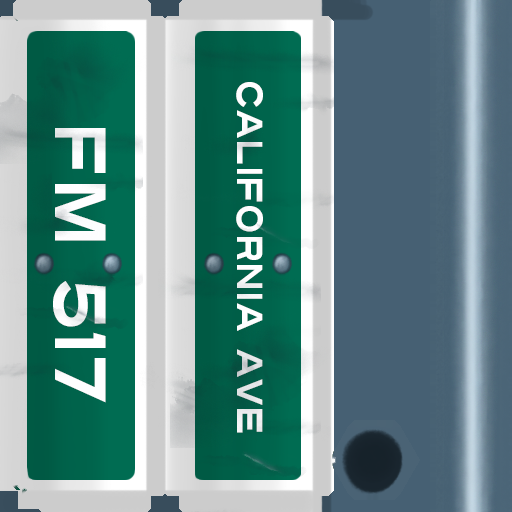
<style>
.page{position:relative;width:512px;height:512px}
.page>*{position:absolute;margin:0}
.t1{font:36px "Turnpike";color:#fefeff;scale:0.75 1}
.t2{font:72px "Turnpike";color:#fefeff;scale:0.75 1}
</style>
<div class="page">
<p class="t1" style="left:236px;top:82px;width:27px;height:351px;rotate:90deg">California Ave</p>
<p class="t2" style="left:53px;top:128px;width:53px;height:275px;rotate:90deg">fm 517</p>
</div>
